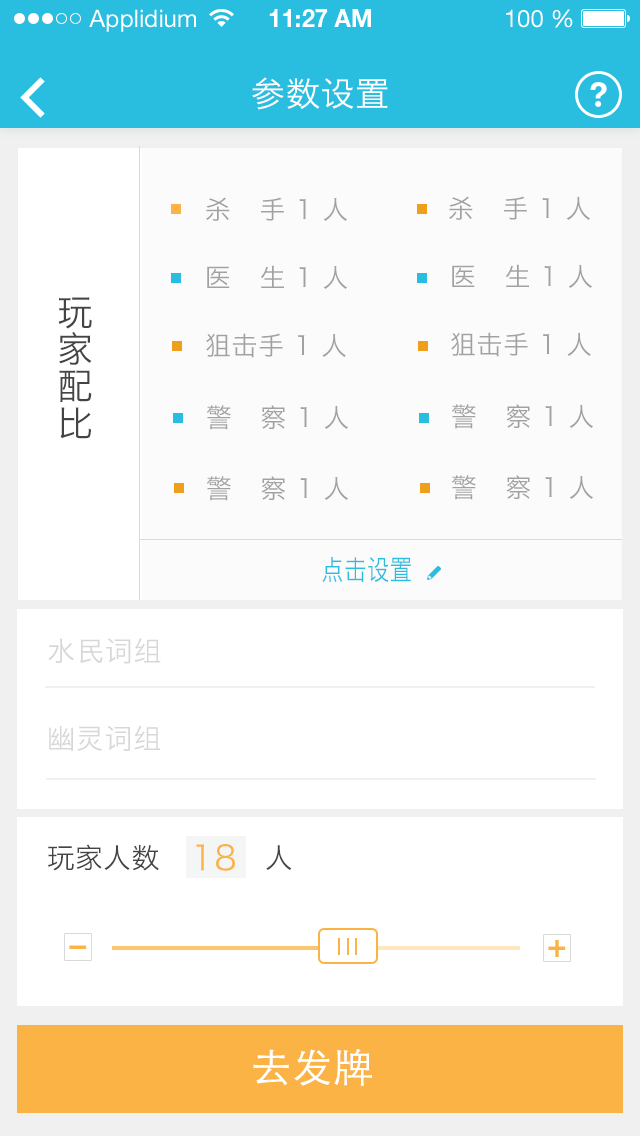
<style>
.page{position:relative;width:640px;height:1136px;background:#ffffff}
.page>*{position:absolute;margin:0}
.t1{font:34px "HiraginoSansGB-W3";letter-spacing:0.025em;color:#ffffff}
.t2{font:26px "HiraginoSansGB-W3";letter-spacing:0.025em;color:#a1a1a1}
.t3{font:36px/49.4px "HiraginoSansGB-W3";letter-spacing:0.025em;color:#444444}
.t4{font:32px/49.4px "HiraginoSansGB-W3";letter-spacing:0.025em;color:#444444}
.t5{font:28px "HiraginoSansGB-W3";letter-spacing:0.025em;color:#29bde0;scale:0.8 1}
.t6{font:28px "HiraginoSansGB-W3";letter-spacing:0.025em;color:#d7d7d7}
.t7{font:28px "HiraginoSansGB-W3";letter-spacing:0.005em;color:#444444}
.t8{font:34px "HiraginoSansGB-W3";letter-spacing:0.025em;color:#fab344}
.t9{font:28px "HiraginoSansGB-W3";letter-spacing:0.025em;color:#444444}
.t10{font:40px "STHeitiSC-Light";letter-spacing:0.025em;color:#ffffff}
</style>
<div class="page">
<p class="t1" style="left:252px;top:77px;width:136px;height:33px">参数设置</p>
<p class="t2" style="left:206px;top:197px;width:141px;height:24px">杀   手 1 人</p>
<p class="t2" style="left:449px;top:196px;width:141px;height:24px">杀   手 1 人</p>
<p class="t2" style="left:207px;top:265px;width:140px;height:24px">医   生 1 人</p>
<p class="t2" style="left:452px;top:264px;width:140px;height:24px">医   生 1 人</p>
<p class="t3" style="left:58px;top:297px;width:34px;height:142px">玩家配比<br><span class="t4">配比</span></p>
<p class="t2" style="left:206px;top:333px;width:140px;height:25px">狙击手 1 人</p>
<p class="t2" style="left:451px;top:332px;width:140px;height:25px">狙击手 1 人</p>
<p class="t2" style="left:206px;top:405px;width:142px;height:25px">警   察 1 人</p>
<p class="t2" style="left:451px;top:404px;width:142px;height:25px">警   察 1 人</p>
<p class="t2" style="left:206px;top:476px;width:142px;height:25px">警   察 1 人</p>
<p class="t2" style="left:451px;top:475px;width:142px;height:25px">警   察 1 人</p>
<p class="t5" style="left:322px;top:557px;width:89px;height:26px">点击设置</p>
<p class="t6" style="left:48px;top:638px;width:113px;height:26px">水民词组</p>
<p class="t6" style="left:49px;top:725px;width:111px;height:26px">幽灵词组</p>
<p class="t7" style="left:48px;top:844px;width:111px;height:27px">玩家人数</p>
<p class="t8" style="left:196px;top:844px;width:39px;height:27px">18</p>
<p class="t9" style="left:266px;top:845px;width:26px;height:25px">人</p>
<p class="t10" style="left:253px;top:1049px;width:119px;height:37px">去发牌</p>
</div>
